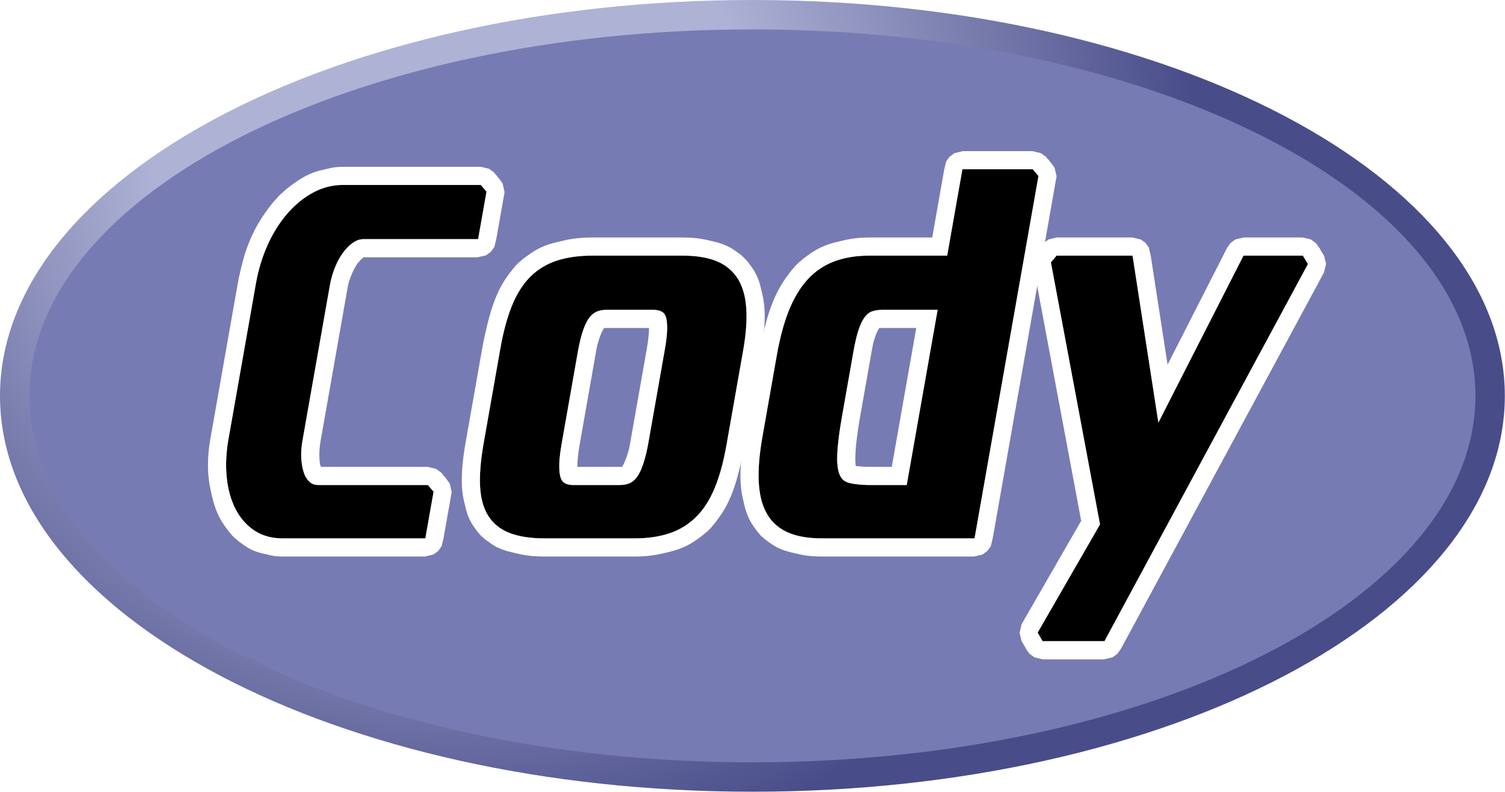
<style>
.page{position:relative;width:1505px;height:792px;background:#777bb3}
.page>*{position:absolute;margin:0}
.t1{font:423.3px "Unispace-Bold";color:#000000;font-weight:bold;font-style:italic}
</style>
<div class="page">
<p class="t1" style="left:226px;top:169px;width:1083px;height:473px">Cody</p>
</div>
